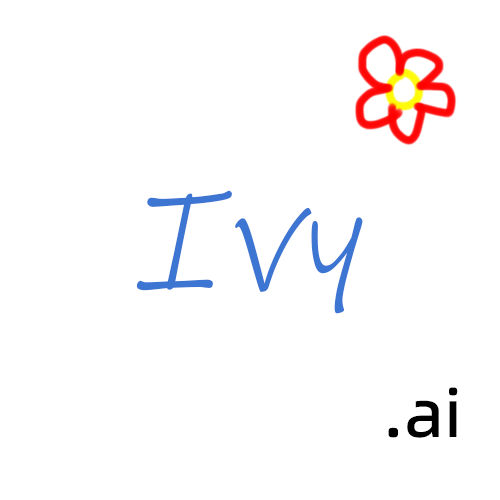
<style>
.page{position:relative;width:500px;height:500px;background:#ffffff}
.page>*{position:absolute;margin:0}
.t1{font:140px "InkFree";color:#3c75d2;font-style:italic}
.t2{font:66px "AlibabaPuHuiTi_2_65_Medium";color:#000000}
</style>
<div class="page">
<p class="t1" style="left:136px;top:190px;width:227px;height:124px">Ivy</p>
<p class="t2" style="left:388px;top:387px;width:70px;height:51px">.ai</p>
</div>
